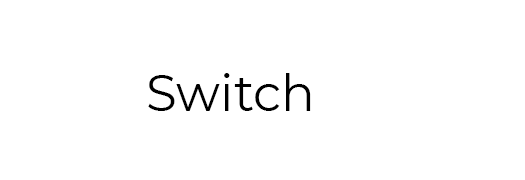
<style>
.page{position:relative;width:525px;height:180px;background:#ffffff}
.page>*{position:absolute;margin:0}
.t1{font:50px "Montserrat-Regular";color:#000000}
</style>
<div class="page">
<p class="t1" style="left:148px;top:73px;width:163px;height:38px">Switch</p>
</div>
